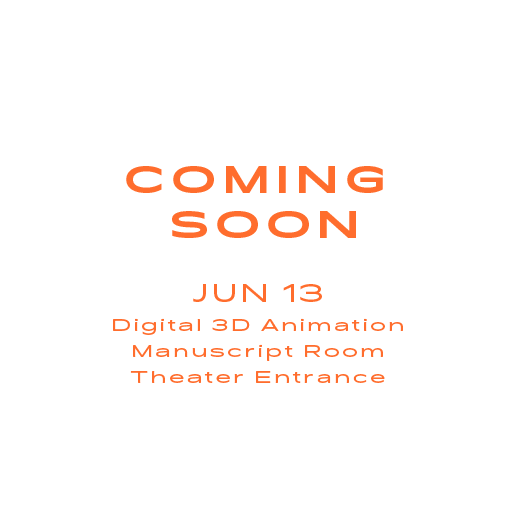
<style>
.page{position:relative;width:512px;height:512px;background:#ffffff}
.page>*{position:absolute;margin:0}
.t1{font:36px/45px "Pano-Bold";letter-spacing:0.2em;color:#ff6d2d}
.t2{font:24px "Pano-Regular";letter-spacing:0.15em;color:#ff6d2d}
.t3{font:16px/26px "Pano-Regular";letter-spacing:0.2em;color:#ff6d2d}
</style>
<div class="page">
<p class="t1" style="left:126px;top:166px;width:257px;height:72px;text-align:center">COMING <br>SOON</p>
<p class="t2" style="left:193px;top:284px;width:129px;height:18px">JUN 13</p>
<p class="t3" style="left:113px;top:318px;width:290px;height:65px;text-align:center">Digital 3D Animation<br>Manuscript Room<br>Theater Entrance</p>
</div>
